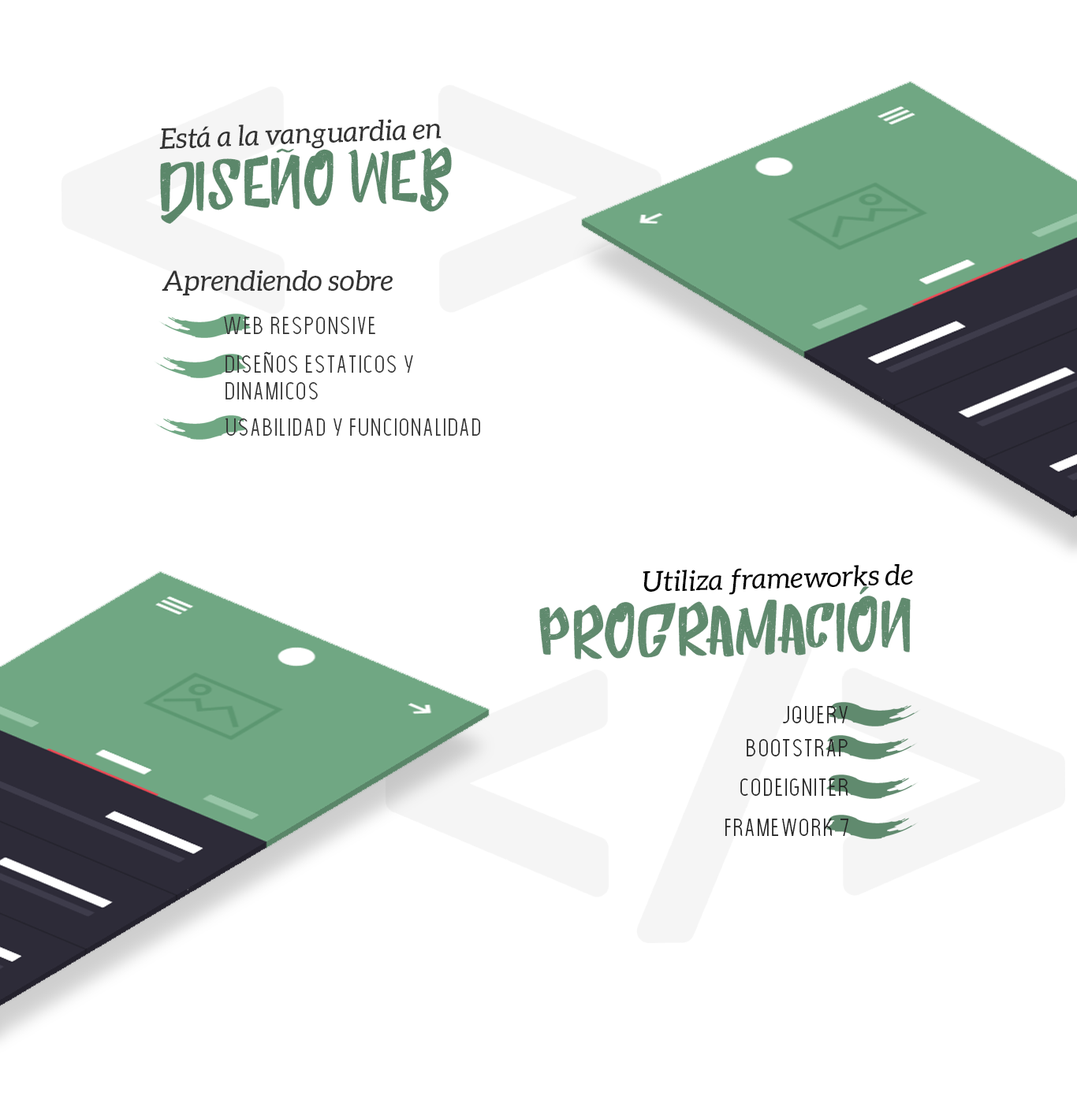
<style>
.page{position:relative;width:1077px;height:1107px;background:#ffffff}
.page>*{position:absolute;margin:0}
.t1{font:28.4px "Aleo-Italic";color:#333333}
.t2{font:66.2px "HumblleRoughtAllCaps";color:#5b876a}
.t3{font:23.6px "TheLightFont";color:#333333}
.t4{font:23.6px/26.8px "TheLightFont";color:#333333}
.t5{font:28.4px "Aleo-Italic";color:#000000}
.t6{font:66.2px "HumblleRoughtAllCaps";color:#608a6e}
.t7{font:23.6px "TheLightFont";color:#232323}
</style>
<div class="page">
<p class="t1" style="left:159px;top:119px;width:282px;height:30px;rotate:-2deg">Está a la vanguardia en</p>
<p class="t2" style="left:160px;top:147px;width:292px;height:77px;rotate:-2deg">diseño web</p>
<p class="t1" style="left:162px;top:270px;width:231px;height:26px">Aprendiendo sobre</p>
<p class="t3" style="left:224px;top:317px;width:151px;height:17px">Web responsive</p>
<p class="t4" style="left:225px;top:355px;width:188px;height:45px">Disenos estaticos y <br>dinamicos</p>
<p class="t3" style="left:225px;top:419px;width:255px;height:17px">Usabilidad y funcionalidad</p>
<p class="t5" style="left:642px;top:564px;width:271px;height:31px;rotate:-2deg">Utiliza frameworks de</p>
<p class="t6" style="left:539px;top:586px;width:371px;height:74px;rotate:-2deg">programación</p>
<p class="t7" style="left:782px;top:706px;width:65px;height:18px">jquery</p>
<p class="t7" style="left:746px;top:739px;width:101px;height:18px">bootstrap</p>
<p class="t7" style="left:740px;top:779px;width:107px;height:17px">codeigniter</p>
<p class="t7" style="left:725px;top:818px;width:123px;height:18px">framework 7</p>
</div>
